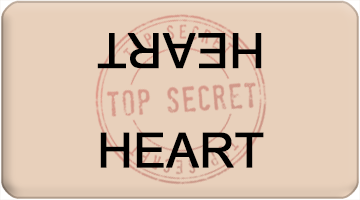
<style>
.page{position:relative;width:360px;height:200px;background:#e8d0bb}
.page>*{position:absolute;margin:0}
.t1{font:48px "ArialMT";color:#000000;font-weight:bold}
</style>
<div class="page">
<p class="t1" style="left:97px;top:33px;width:165px;height:36px;rotate:180deg">HEART</p>
<p class="t1" style="left:100px;top:132px;width:164px;height:36px">HEART</p>
</div>
